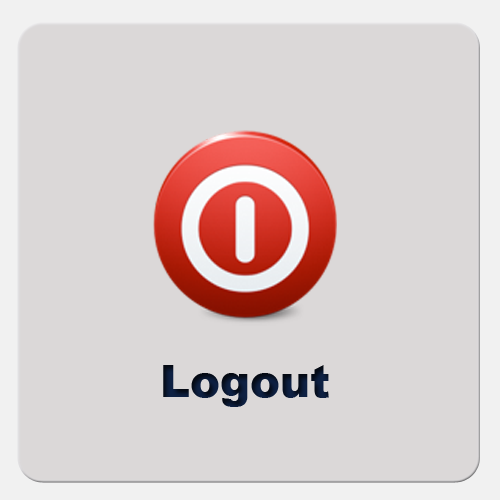
<style>
.page{position:relative;width:500px;height:500px;background:#dbd8d8}
.page>*{position:absolute;margin:0}
.t1{font:45px "Arial-Black";color:#0e2144}
</style>
<div class="page">
<p class="t1" style="left:163px;top:365px;width:166px;height:42px">Logout</p>
</div>
